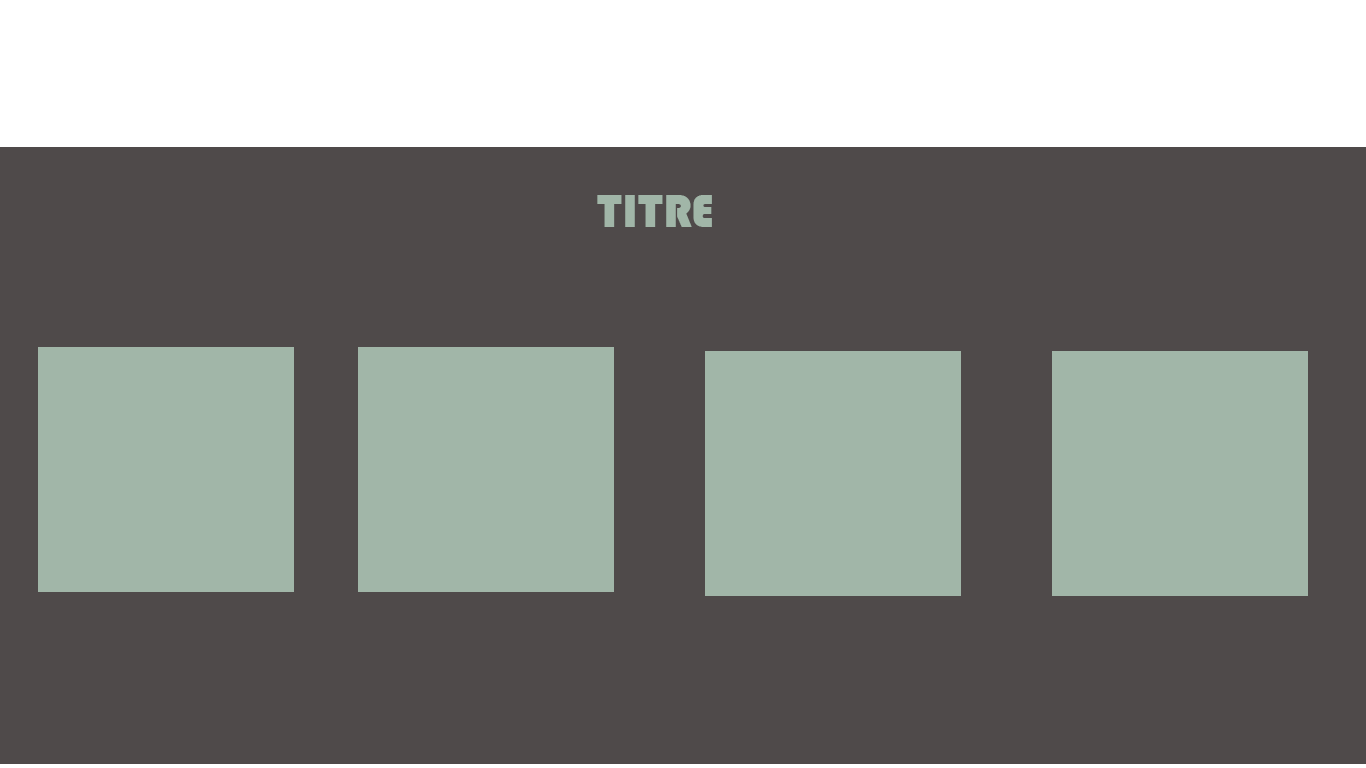
<style>
.page{position:relative;width:1366px;height:768px;background:#4f4a4a}
.page>*{position:absolute;margin:0}
.t1{font:48px "Bauhaus93";color:#a1b6a8}
</style>
<div class="page">
<p class="t1" style="left:597px;top:195px;width:115px;height:32px">TITRE</p>
</div>
